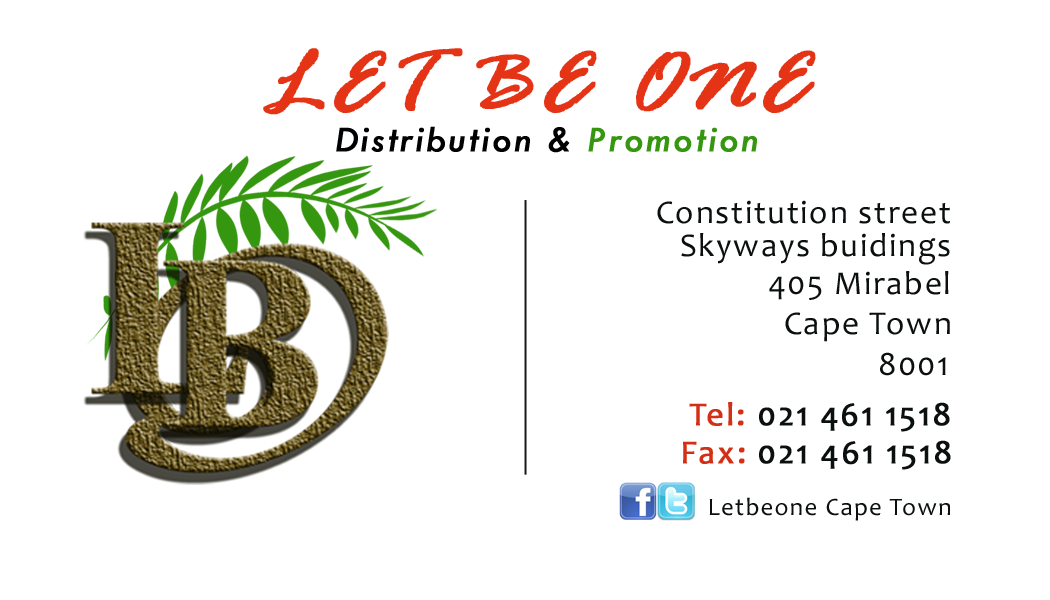
<style>
.page{position:relative;width:1050px;height:600px;background:#ffffff}
.page>*{position:absolute;margin:0}
.t1{font:90.4px "RageItalic";letter-spacing:0.05em;color:#e53316;font-weight:bold}
.t2{font:37.5px "TwCenMT-Italic";letter-spacing:0.05em;color:#000103;font-weight:bold}
.t3{font:37.5px "TwCenMT-Italic";letter-spacing:0.05em;color:#35960f;font-weight:bold}
.t4{font:33.3px "Candara";letter-spacing:0.05em;color:#0b0f10}
.t5{font:33.3px "Candara";letter-spacing:0.05em;color:#0b0f10;font-weight:bold}
.t6{font:33.3px "Candara";letter-spacing:0.05em;color:#d42f14;font-weight:bold}
.t7{font:25px "Candara";letter-spacing:0.05em;color:#0b0f10}
</style>
<div class="page">
<p class="t1" style="left:263px;top:48px;width:553px;height:67px">LET BE ONE</p>
<p class="t2" style="left:336px;top:126px;width:421px;height:27px">Distribution &amp; <span class="t3">Promotion</span></p>
<p class="t4" style="left:657px;top:200px;width:293px;height:24px">Constitution street</p>
<p class="t4" style="left:681px;top:233px;width:269px;height:32px">Skyways buidings</p>
<p class="t4" style="left:769px;top:271px;width:180px;height:29px">405 Mirabel</p>
<p class="t4" style="left:785px;top:312px;width:165px;height:30px">Cape Town</p>
<p class="t4" style="left:880px;top:352px;width:66px;height:24px">8001</p>
<p class="t5" style="left:689px;top:402px;width:261px;height:30px"><span class="t6">Tel:</span> 021 461 1518</p>
<p class="t5" style="left:683px;top:440px;width:268px;height:30px"><span class="t6">Fax:</span> 021 461 1518</p>
<p class="t7" style="left:709px;top:497px;width:241px;height:24px">Letbeone Cape Town</p>
</div>
